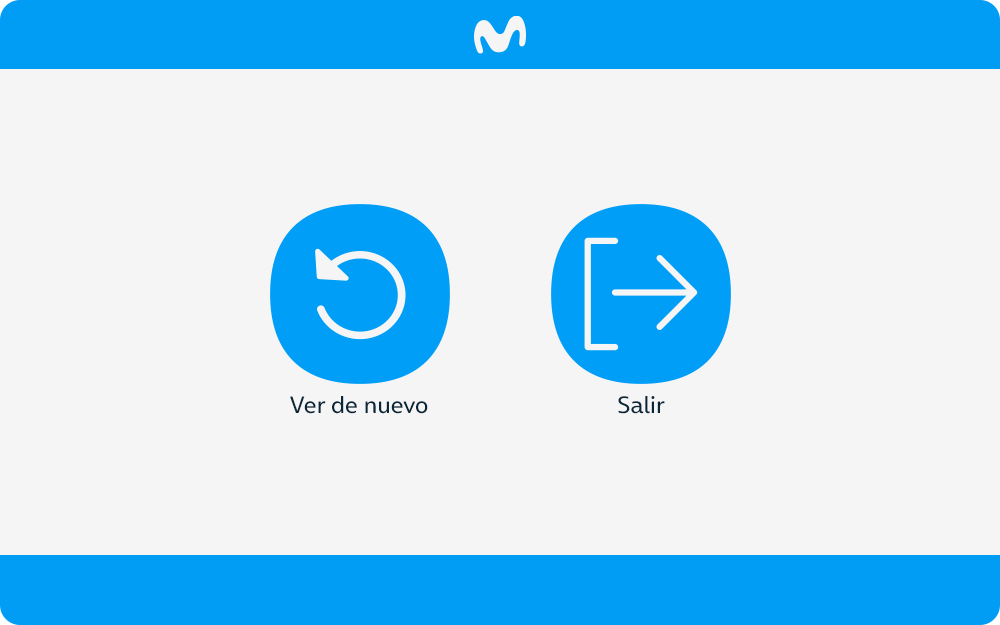
<style>
.page{position:relative;width:1000px;height:625px;background:#f5f5f5}
.page>*{position:absolute;margin:0}
.t1{font:24px "OnAir-Regular";color:#0a2739}
</style>
<div class="page">
<p class="t1" style="left:290px;top:396px;width:138px;height:18px">Ver de nuevo</p>
<p class="t1" style="left:618px;top:396px;width:47px;height:18px">Salir</p>
</div>
